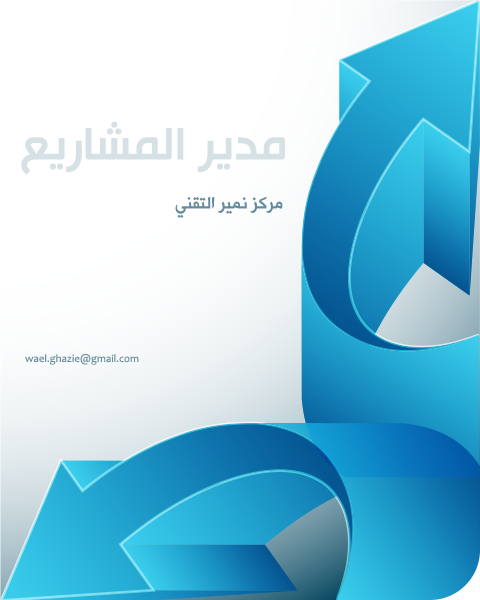
<style>
.page{position:relative;width:480px;height:600px;background:#ffffff}
.page>*{position:absolute;margin:0}
.t1{font:53px "HacenTunisia";color:#d6e1e5}
.t2{font:19.5px "HacenLinerScreen";color:#628b9b}
.t3{font:10.9px "Candara";color:#678f9e}
</style>
<div class="page">
<p class="t1" style="left:21px;top:121px;width:264px;height:54px">مدير المشاريع</p>
<p class="t2" style="left:175px;top:196px;width:108px;height:22px">مركز نمير التقني</p>
<p class="t3" style="left:25px;top:354px;width:114px;height:11px">wael.ghazie@gmail.com</p>
</div>
